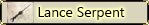
<style>
.page{position:relative;width:149px;height:25px;background:#d9d5bd}
.page>*{position:absolute;margin:0}
.t1{font:14px "LaoUI";color:#000000}
</style>
<div class="page">
<p class="t1" style="left:38px;top:7px;width:87px;height:13px">Lance Serpent</p>
</div>
